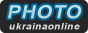
<style>
.page{position:relative;width:88px;height:33px;background:#262626}
.page>*{position:absolute;margin:0}
.t1{font:18px "Arial-BoldMT";letter-spacing:0.05em;color:#c3dcda;font-style:italic;scale:1.1 1}
.t2{font:9px "Arial-BoldMT";letter-spacing:0.05em;color:#dcdcdc;font-style:italic;scale:1.1 1}
</style>
<div class="page">
<p class="t1" style="left:8px;top:5px;width:74px;height:14px">PHOTO</p>
<p class="t2" style="left:9px;top:23px;width:71px;height:7px">ukrainaonline</p>
</div>
